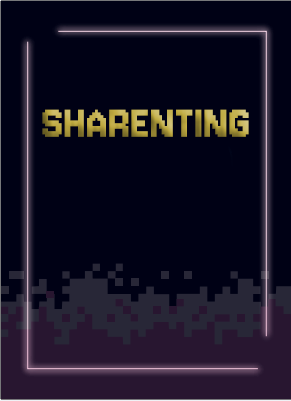
<style>
.page{position:relative;width:291px;height:401px;background:#000115}
.page>*{position:absolute;margin:0}
.t1{font:50px "Jersey10-Regular";letter-spacing:0.025em}
</style>
<div class="page">
<p class="t1" style="left:42px;top:109px;width:207px;height:28px">SHARENTING</p>
</div>
